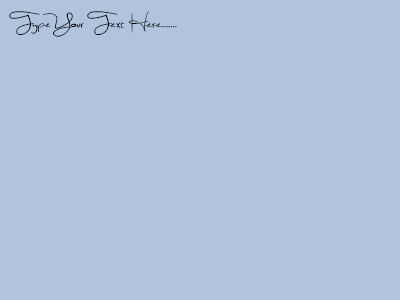
<style>
.page{position:relative;width:400px;height:300px;background:#b0c5dd}
.page>*{position:absolute;margin:0}
.t1{font:18px "SweetlyBroken";color:#010101;scale:1.12 1}
</style>
<div class="page">
<p class="t1" style="left:9px;top:11px;width:168px;height:26px">Type Your Text Here.......</p>
</div>
